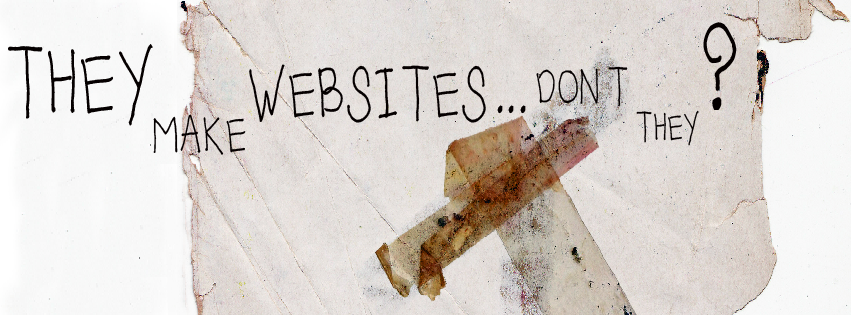
<style>
.page{position:relative;width:851px;height:315px}
.page>*{position:absolute;margin:0}
.t1{font:102.8px "WSPeskimo";color:#050000;scale:0.71 1}
.t2{font:86.2px "WSPeskimo";color:#050000;scale:0.71 1}
.t3{font:66.3px "WSPeskimo";color:#050000;scale:0.71 1}
.t4{font:46.4px "WSPeskimo";color:#050000;scale:0.71 1}
.t5{font:49.7px "WSPeskimo";letter-spacing:0.1em;color:#050000;scale:0.71 1}
.t6{font:36.5px "WSPeskimo";color:#050000;scale:0.71 1}
.t7{font:49.7px "WSPeskimo";color:#050000;scale:0.71 1}
</style>
<div class="page">
<p class="t1" style="left:703px;top:22px;width:34px;height:88px">?</p>
<p class="t2" style="left:8px;top:44px;width:145px;height:82px">THEY</p>
<p class="t3" style="left:249px;top:64px;width:237px;height:59px">WEBSITES</p>
<p class="t4" style="left:536px;top:66px;width:92px;height:40px">DON’T</p>
<p class="t5" style="left:497px;top:105px;width:29px;height:9px">...</p>
<p class="t6" style="left:636px;top:110px;width:63px;height:36px">THEY</p>
<p class="t7" style="left:153px;top:114px;width:93px;height:41px">MAKE</p>
</div>
